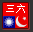
<style>
.page{position:relative;width:33px;height:32px;background:#f20000}
.page>*{position:absolute;margin:0}
.t1{font:10.4px "SimSun";color:#ffffff}
</style>
<div class="page">
<p class="t1" style="left:6px;top:4px;width:19px;height:9px">三六</p>
</div>
